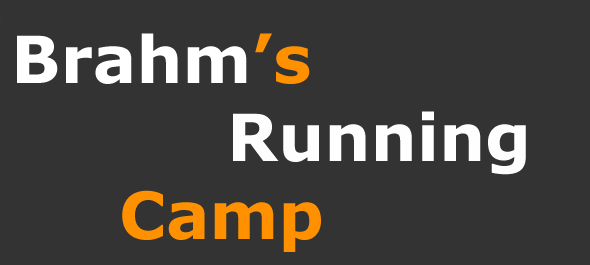
<style>
.page{position:relative;width:590px;height:265px;background:#333333}
.page>*{position:absolute;margin:0}
.t1{font:65px "Verdana-Bold";color:#fffefe}
.t2{font:65px "Verdana-Bold";color:#ffffff}
.t3{font:65px "Verdana-Bold";color:#ff9000}
</style>
<div class="page">
<p class="t1" style="left:17px;top:33px;width:509px;height:219px"><span class="t2">Brahm</span><span class="t3">’s <br></span>      Running<br>   <span class="t3">Camp</span></p>
</div>
